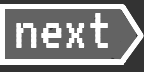
<style>
.page{position:relative;width:144px;height:72px;background:#636363}
.page>*{position:absolute;margin:0}
.t1{font:61.5px "VT323-Regular";color:#ffffff}
</style>
<div class="page">
<p class="t1" style="left:16px;top:13px;width:92px;height:35px">next</p>
</div>
